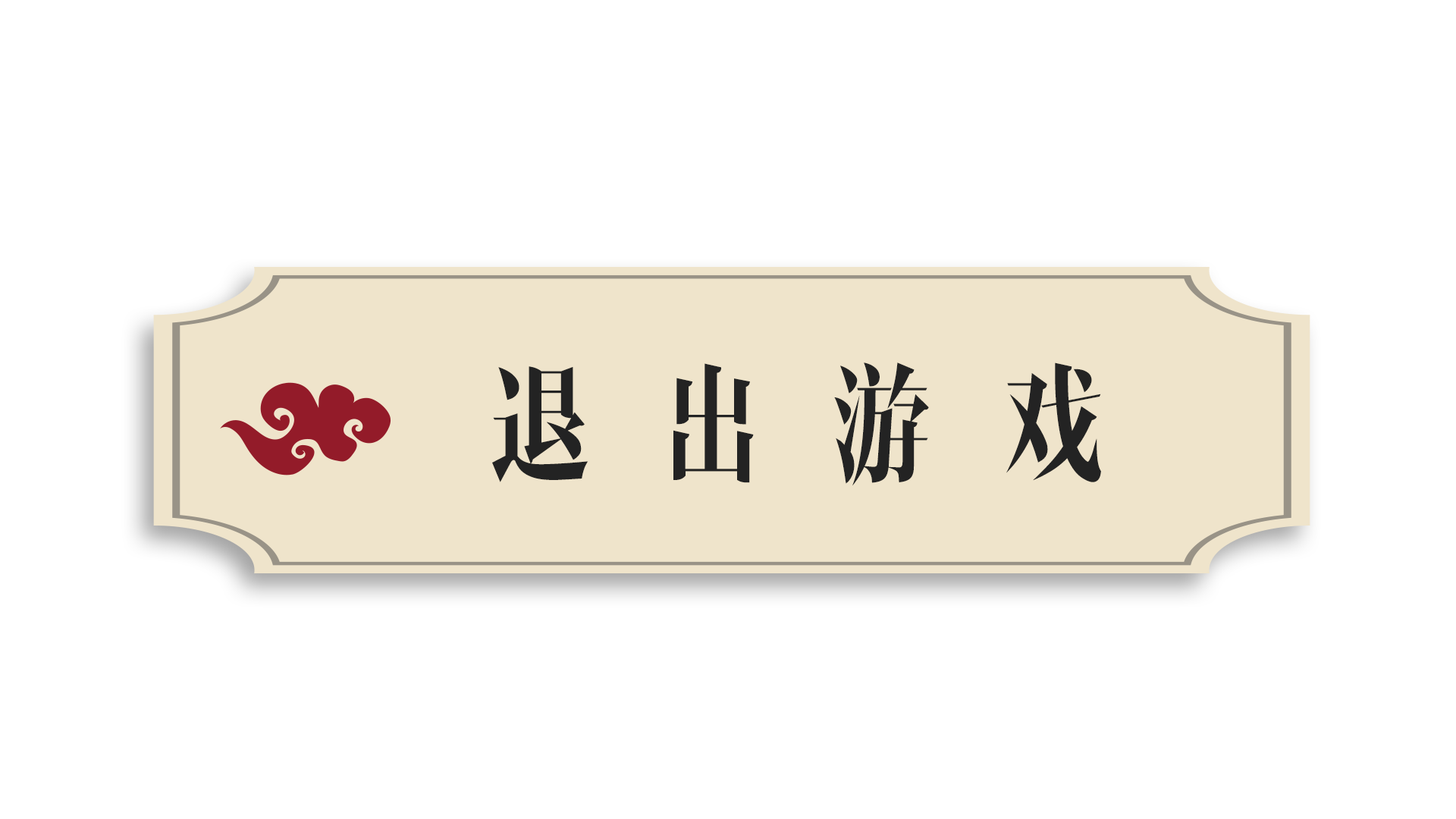
<style>
.page{position:relative;width:1456px;height:819px;background:#ffffff}
.page>*{position:absolute;margin:0}
.t1{font:132.7px "RTWSJyunYaG0v1-Regular";letter-spacing:0.54em;color:#232323;text-transform:uppercase}
</style>
<div class="page">
<p class="t1" style="left:492px;top:362px;width:609px;height:124px">退出游戏</p>
</div>
